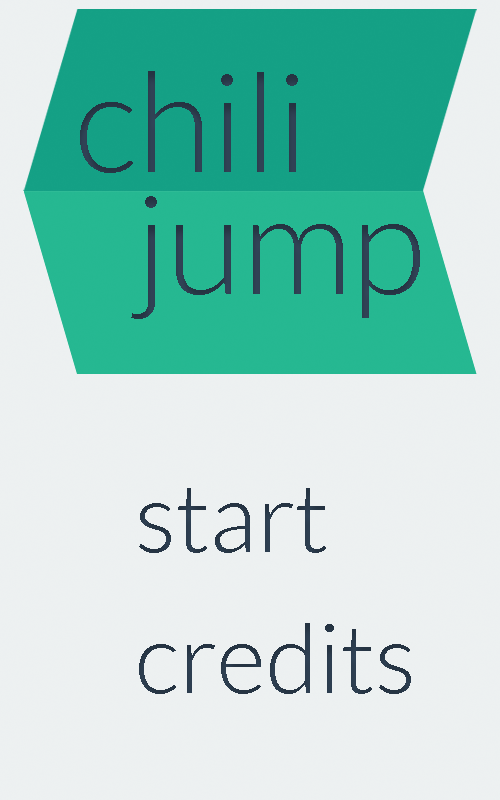
<style>
.page{position:relative;width:500px;height:800px;background:#edf1f1}
.page>*{position:absolute;margin:0}
.t1{font:137.5px "Lato-Light";color:#35495e}
.t2{font:95.8px "Lato-Light";color:#35495e}
</style>
<div class="page">
<p class="t1" style="left:80px;top:71px;width:218px;height:102px">chili</p>
<p class="t1" style="left:131px;top:196px;width:289px;height:123px">jump</p>
<p class="t2" style="left:139px;top:488px;width:187px;height:65px">start</p>
<p class="t2" style="left:139px;top:623px;width:272px;height:71px">credits</p>
</div>
